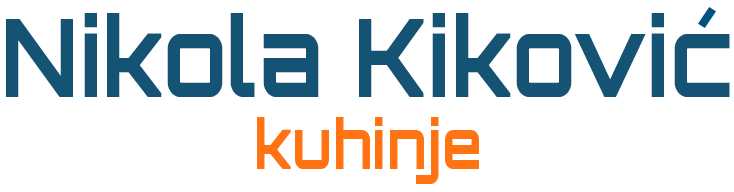
<style>
.page{position:relative;width:734px;height:192px;background:#ffffff}
.page>*{position:absolute;margin:0}
.t1{font:108.8px/6px "Orbitron-Bold";letter-spacing:0.01em;color:#145374;scale:0.85 1}
.t2{font:68px/6px "Orbitron-Bold";letter-spacing:0.01em;color:#ff7315;scale:0.85 1}
</style>
<div class="page">
<p class="t1" style="left:6px;top:13px;width:724px;height:171px;text-align:center">Nikola Kikovic<br><br><br><br><br><br><br><br><br><br><br><br><span class="t2">kuhinje</span></p>
</div>
